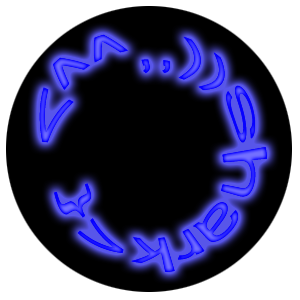
<style>
.page{position:relative;width:300px;height:300px;background:#000000}
.page>*{position:absolute;margin:0}
.t1{font:48.8px "ArialNarrow"}
.t2{font:48.5px "ArialNarrow"}
</style>
<div class="page">
<p class="t1" style="left:39px;top:34px;width:216px;height:109px;text-align:right">S((,,^^&gt;</p>
<p class="t1" style="left:39px;top:34px;width:216px;height:109px;text-align:right">S((,,^^&gt;</p>
<p class="t2" style="left:54px;top:147px;width:213px;height:125px;rotate:166deg">}&gt;hark</p>
<p class="t2" style="left:54px;top:147px;width:213px;height:125px;rotate:166deg">}&gt;hark</p>
</div>
